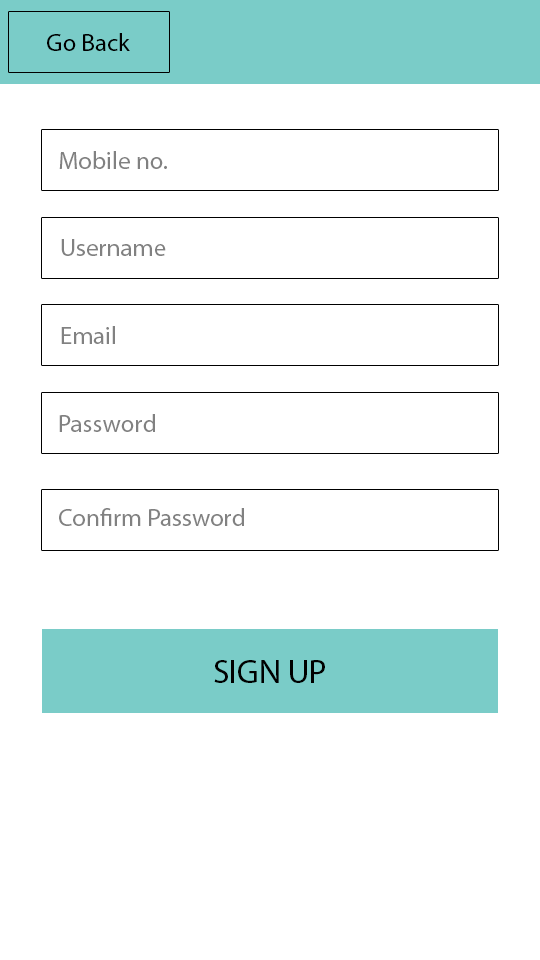
<style>
.page{position:relative;width:540px;height:960px;background:#ffffff}
.page>*{position:absolute;margin:0}
.t1{font:25px "MyriadPro-Regular";color:#000000}
.t2{font:25px "MyriadPro-Regular";color:#818181}
.t3{font:33.3px "MyriadPro-Regular";color:#000000}
</style>
<div class="page">
<p class="t1" style="left:47px;top:33px;width:83px;height:18px">Go Back</p>
<p class="t2" style="left:59px;top:151px;width:108px;height:18px">Mobile no.</p>
<p class="t2" style="left:61px;top:239px;width:105px;height:17px">Username</p>
<p class="t2" style="left:61px;top:326px;width:54px;height:18px">Email</p>
<p class="t2" style="left:59px;top:414px;width:96px;height:18px">Password</p>
<p class="t2" style="left:59px;top:508px;width:185px;height:18px">Confirm Password</p>
<p class="t3" style="left:214px;top:660px;width:111px;height:23px">SIGN UP</p>
</div>
